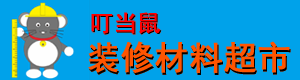
<style>
.page{position:relative;width:300px;height:80px;background:#00a2ea}
.page>*{position:absolute;margin:0}
.t1{font:23.1px "SimHei";color:#ff0000;font-weight:bold}
.t2{font:33.3px "SimHei";color:#ff5400;font-weight:bold}
</style>
<div class="page">
<p class="t1" style="left:91px;top:12px;width:70px;height:22px">叮当鼠</p>
<p class="t2" style="left:88px;top:41px;width:202px;height:32px">装修材料超市</p>
</div>
